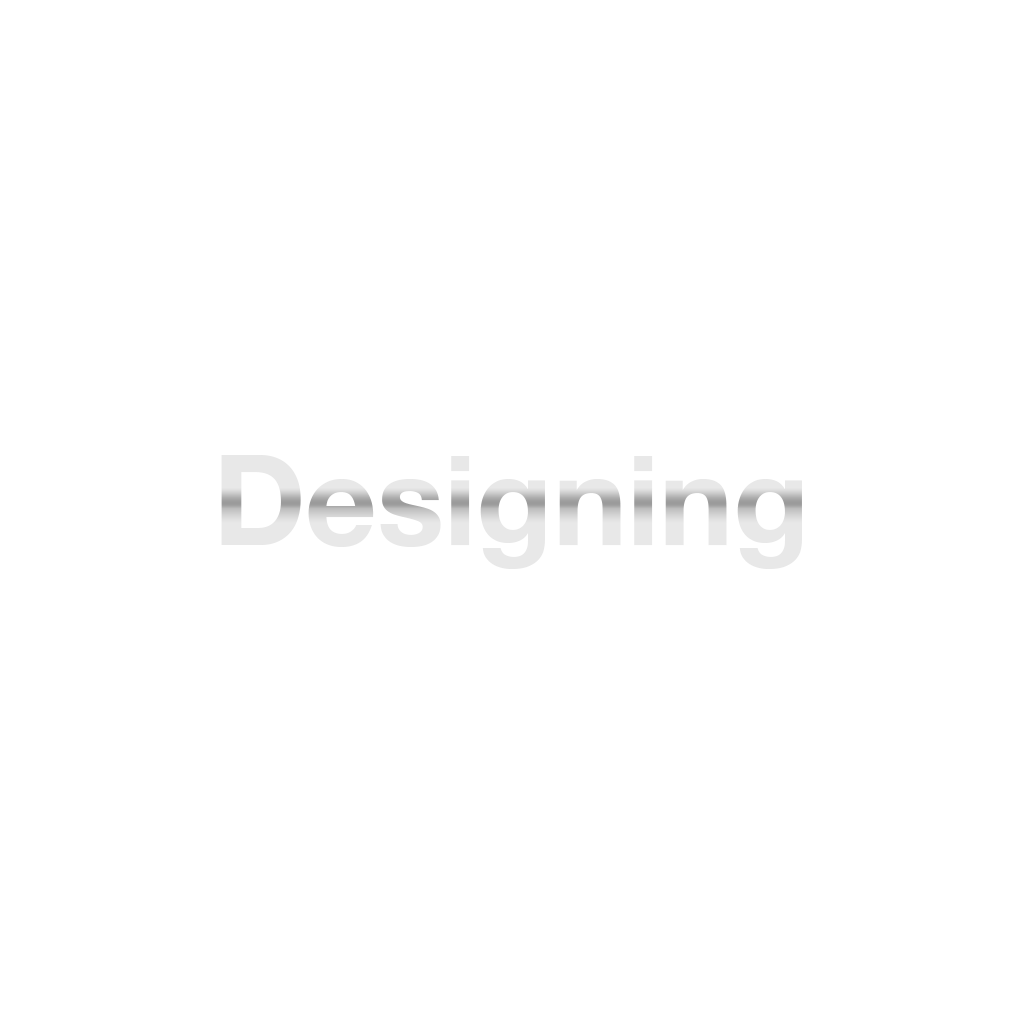
<style>
.page{position:relative;width:1024px;height:1024px;background:#ffffff}
.page>*{position:absolute;margin:0}
.t1{font:125px "HelveticaNeue-Bold";color:#e8e8e8}
</style>
<div class="page">
<p class="t1" style="left:221px;top:455px;width:581px;height:114px">Designing</p>
</div>
